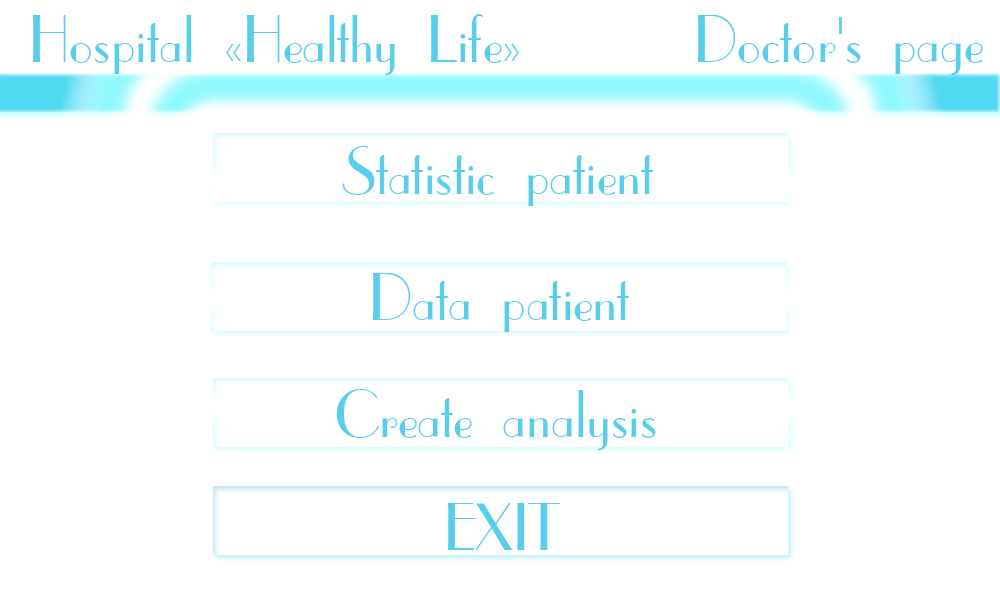
<style>
.page{position:relative;width:1000px;height:600px;background:#ffffff}
.page>*{position:absolute;margin:0}
.t1{font:63.5px "CafeParisC";color:#56ceec}
</style>
<div class="page">
<p class="t1" style="left:33px;top:14px;width:486px;height:61px">Hospital «Healthy Life»</p>
<p class="t1" style="left:698px;top:15px;width:285px;height:60px">Doctor's page</p>
<p class="t1" style="left:342px;top:146px;width:311px;height:60px">Statistic patient</p>
<p class="t1" style="left:373px;top:273px;width:256px;height:59px">Data patient</p>
<p class="t1" style="left:336px;top:389px;width:320px;height:61px">Create analysis</p>
<p class="t1" style="left:448px;top:503px;width:112px;height:47px">EXIT</p>
</div>
